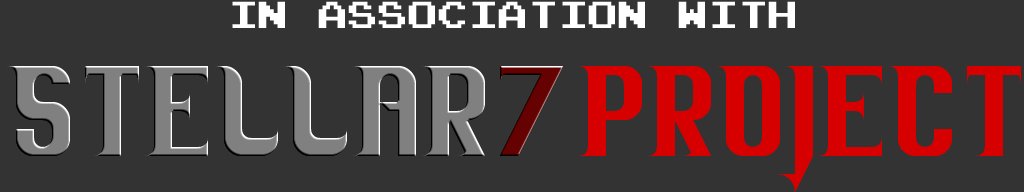
<style>
.page{position:relative;width:1024px;height:192px;background:#333333}
.page>*{position:absolute;margin:0}
.t1{font:30px "Emulogic";color:#ffffff}
.t2{font:144px "Western-Breeze"}
</style>
<div class="page">
<p class="t1" style="left:232px;top:1px;width:563px;height:27px">In association with</p>
<p class="t2" style="left:7px;top:66px;width:1014px;height:126px">STELLAR7PROJECT</p>
</div>
